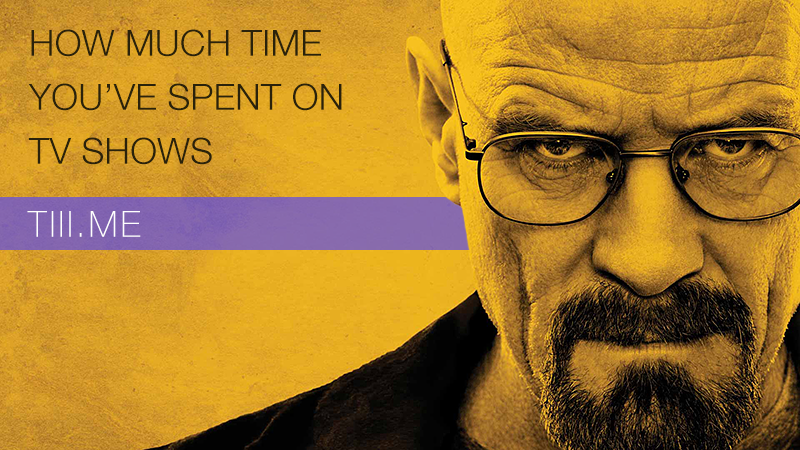
<style>
.page{position:relative;width:800px;height:450px}
.page>*{position:absolute;margin:0}
.t1{font:36px/54px "HelveticaNeue-Light";letter-spacing:0.01em;color:#2a220b;text-transform:uppercase}
.t2{font:36px "HelveticaNeue-Thin";letter-spacing:0.075em;color:#ffffff;text-transform:uppercase}
</style>
<div class="page">
<p class="t1" style="left:28px;top:29px;width:314px;height:136px">How much time <br>you’ve spent on <br>TV shows</p>
<p class="t2" style="left:27px;top:211px;width:114px;height:26px">Tiii.me</p>
</div>
